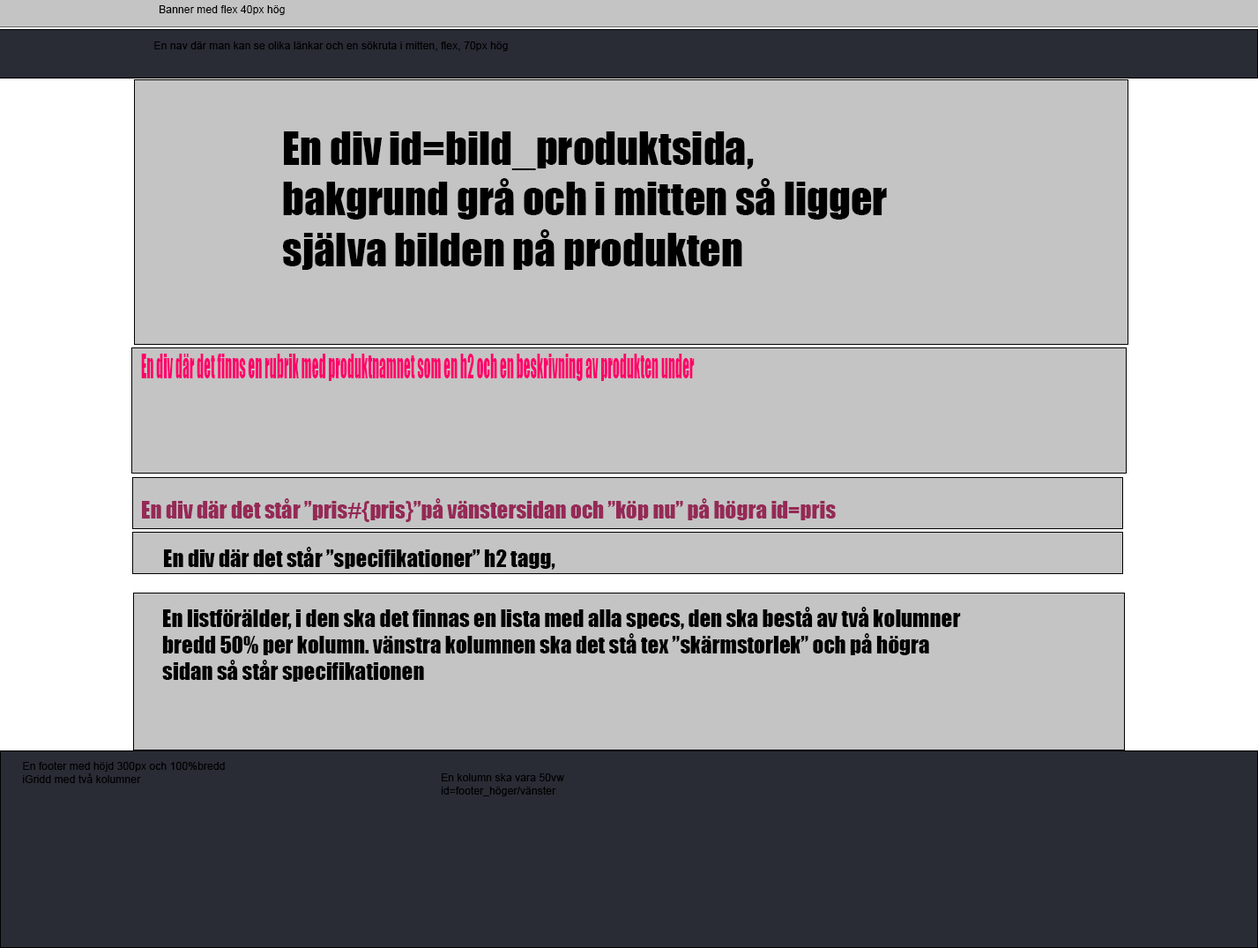
<style>
.page{position:relative;width:1258px;height:948px;background:#c4c4c4}
.page>*{position:absolute;margin:0}
.t1{font:10.8px "ArialMT";color:#000000}
.t2{font:42.3px "Impact";color:#000000}
.t3{font:31.7px "Impact";color:#ff006a;scale:0.43 1}
.t4{font:22px "Impact";color:#952956}
.t5{font:22px "Impact";color:#000000}
</style>
<div class="page">
<p class="t1" style="left:160px;top:5px;width:125px;height:10px">Banner med flex 40px hög</p>
<p class="t1" style="left:154px;top:41px;width:354px;height:10px">En nav där man kan se olika länkar och en sökruta i mitten, flex, 70px hög</p>
<p class="t2" style="left:283px;top:131px;width:604px;height:139px">En div id=bild_produktsida, bakgrund grå och i mitten så ligger själva bilden på produkten</p>
<p class="t3" style="left:141px;top:354px;width:554px;height:27px">En div där det finns en rubrik med produktnamnet som en h2 och en beskrivning av produkten under</p>
<p class="t4" style="left:142px;top:498px;width:694px;height:24px">En div där det står ”pris#{pris}”på vänstersidan och ”köp nu” på högra id=pris</p>
<p class="t5" style="left:164px;top:547px;width:391px;height:23px">En div där det står ”specifikationer” h2 tagg, class=underrubrik</p>
<p class="t5" style="left:162px;top:607px;width:799px;height:75px">En listförälder, i den ska det finnas en lista med alla specs, den ska bestå av två kolumner bredd 50% per kolumn. vänstra kolumnen ska det stå tex ”skärmstorlek” och på högra sidan så står specifikationen</p>
<p class="t1" style="left:23px;top:762px;width:202px;height:21px">En footer med höjd 300px och 100%bredd<br>iGridd med två kolumner</p>
<p class="t1" style="left:441px;top:773px;width:123px;height:23px">En kolumn ska vara 50vw id=footer_höger/vänster</p>
</div>
